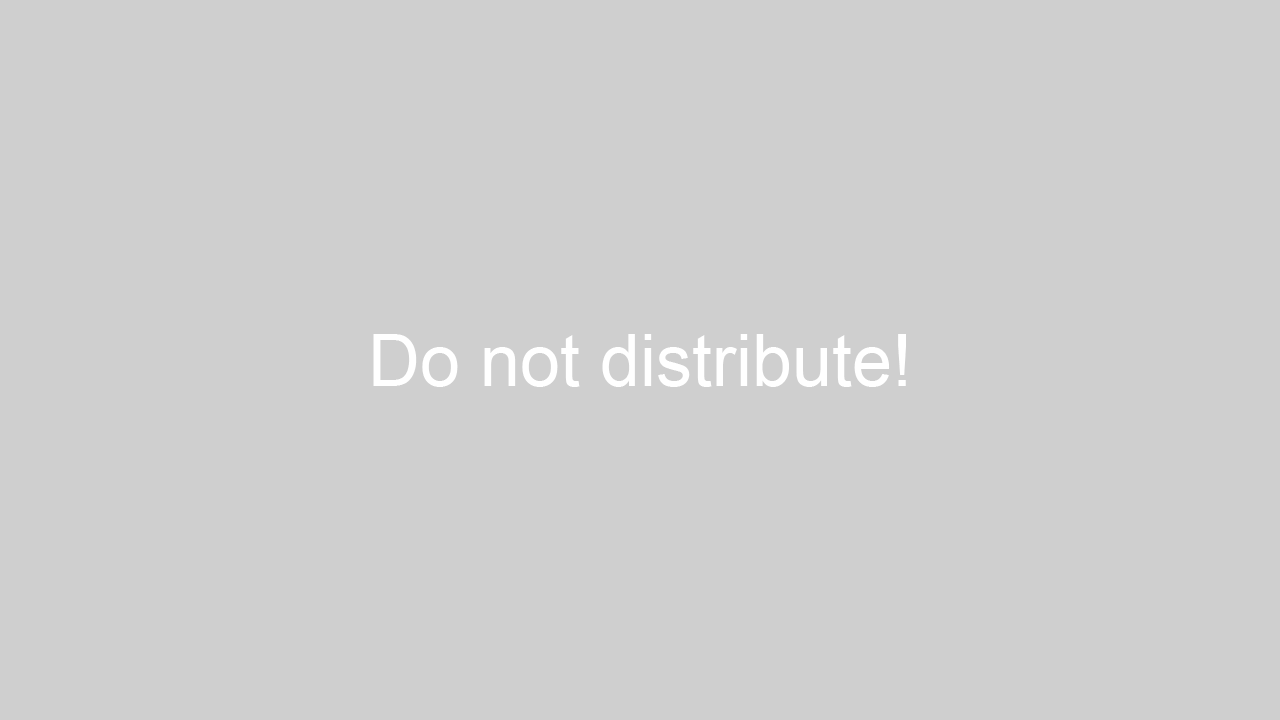
<style>
.page{position:relative;width:1280px;height:720px;background:#cfcfcf}
.page>*{position:absolute;margin:0}
.t1{font:72px "ArialMT";color:#ffffff}
</style>
<div class="page">
<p class="t1" style="left:373px;top:334px;width:533px;height:53px">Do not distribute!</p>
</div>
